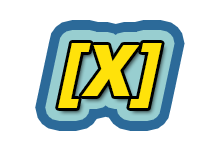
<style>
.page{position:relative;width:218px;height:154px;background:#ffffff}
.page>*{position:absolute;margin:0}
.t1{font:72px "OpenSans-ExtraboldItalic";color:#ffe20a}
</style>
<div class="page">
<p class="t1" style="left:58px;top:43px;width:104px;height:65px">[X]</p>
<p class="t1" style="left:58px;top:43px;width:104px;height:65px">[X]</p>
<p class="t1" style="left:58px;top:43px;width:104px;height:65px">[X]</p>
<p class="t1" style="left:58px;top:43px;width:104px;height:65px">[X]</p>
</div>
